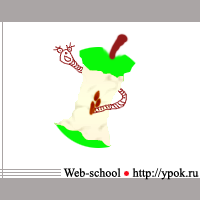
<style>
.page{position:relative;width:200px;height:200px;background:#ffffff}
.page>*{position:absolute;margin:0}
.t1{font:12px "TimesNewRomanPSMT";color:#000000}
</style>
<div class="page">
<p class="t1" style="left:63px;top:168px;width:136px;height:12px">Web-school    http://ypok.ru</p>
</div>
